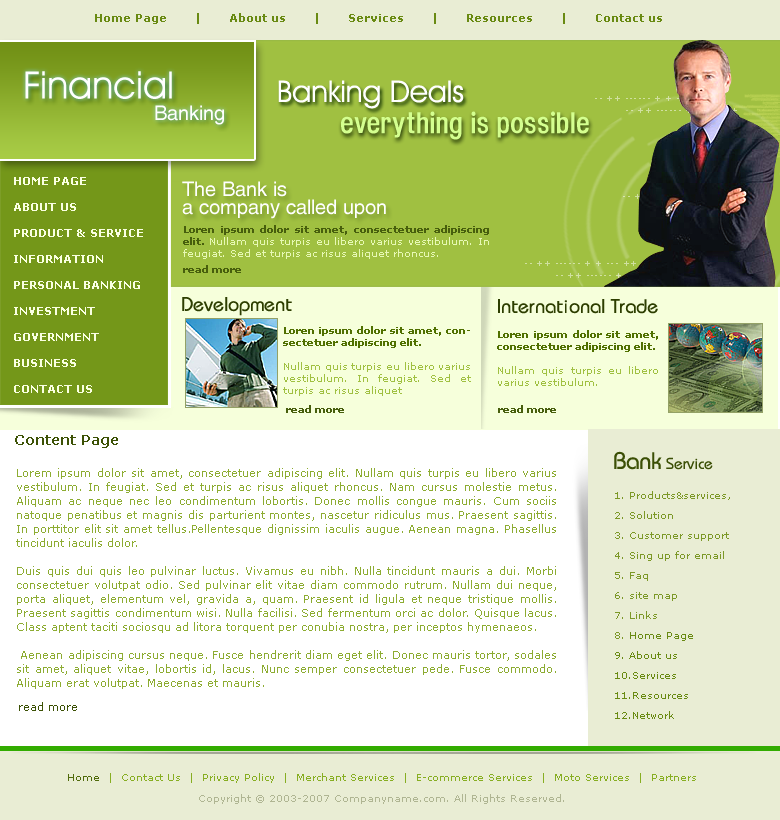
<style>
.page{position:relative;width:780px;height:820px;background:#ffffff}
.page>*{position:absolute;margin:0}
.t1{font:11px "Verdana-Bold";color:#698a12}
.t2{font:38px "AvantGardeITCbyBT-Book";color:#ffffff}
.t3{font:30px "AvantGardeITCbyBT-Book";color:#ffffff}
.t4{font:20px "Helios";color:#ffffff}
.t5{font:29px "HeadacheNormal";color:#d4ff8f}
.t6{font:11px/13px "Verdana-Bold";color:#faffe2}
.t7{font:20px/18px "Helios";color:#ffffff}
.t8{font:20px "Bauhaus";color:#2d3e00}
.t9{font:10px "Verdana";color:#a0c041}
.t10{font:10px "Verdana-Bold";color:#507000}
.t11{font:10px "Verdana-Bold";color:#475e0d}
.t12{font:14px "Verdana-Bold";color:#3c5105}
.t13{font:16px "Bauhaus";color:#3b4f05}
.t14{font:24px "Bauhaus";color:#3b4f05}
.t15{font:11px/14px "Verdana";color:#8dac32}
.t16{font:10px/20px "Verdana";color:#7c9827}
.t17{font:10px/20px "Verdana";color:#698a12}
.t18{font:11px "Verdana";color:#3c5105}
.t19{font:10px/21px "Verdana";color:#87ae22}
.t20{font:10px/21px "Verdana";color:#516b0c}
.t21{font:10px/21px "Verdana";color:#afb592}
</style>
<div class="page">
<p class="t1" style="left:95px;top:13px;width:567px;height:11px">Home Page       |       About us       |       Services       |       Resources       |       Contact us</p>
<p class="t2" style="left:25px;top:71px;width:147px;height:28px">Financial</p>
<p class="t3" style="left:278px;top:80px;width:186px;height:29px">Banking Deals</p>
<p class="t4" style="left:155px;top:105px;width:69px;height:20px">Banking</p>
<p class="t5" style="left:341px;top:111px;width:248px;height:29px">everything is possible</p>
<p class="t6" style="left:14px;top:177px;width:129px;height:216px;text-align:justify">HOME PAGE<br><br>ABOUT US<br><br>PRODUCT &amp; SERVICE<br><br>INFORMATION<br><br>PERSONAL BANKING<br><br>INVESTMENT<br><br>GOVERNMENT<br><br>BUSINESS<br><br>CONTACT US</p>
<p class="t7" style="left:182px;top:181px;width:204px;height:38px">The Bank is<br>a company called upon</p>
<p class="t8" style="left:182px;top:297px;width:110px;height:19px">Development</p>
<p class="t8" style="left:498px;top:299px;width:160px;height:15px">International Trade</p>
<p class="t9" style="left:283px;top:326px;width:188px;height:70px;text-align:justify"><span class="t10">Loren ipsum dolor sit amet, consectetuer adipiscing elit.<br><br></span>Nullam quis turpis eu libero varius vestibulum. In feugiat. Sed et turpis ac risus aliquet</p>
<p class="t10" style="left:497px;top:330px;width:161px;height:56px;text-align:justify">Loren ipsum dolor sit amet, consectetuer adipiscing elit.<br><br><span class="t9">Nullam quis turpis eu libero varius vestibulum.</span></p>
<p class="t11" style="left:286px;top:405px;width:58px;height:8px">read more</p>
<p class="t11" style="left:498px;top:405px;width:58px;height:8px">read more</p>
<p class="t12" style="left:15px;top:435px;width:103px;height:13px">Content Page</p>
<p class="t13" style="left:614px;top:451px;width:99px;height:19px"><span class="t14">Bank</span> Service</p>
<p class="t15" style="left:16px;top:468px;width:540px;height:221px;text-align:justify">Lorem ipsum dolor sit amet, consectetuer adipiscing elit. Nullam quis turpis eu libero varius vestibulum. In feugiat. Sed et turpis ac risus aliquet rhoncus. Nam cursus molestie metus. Aliquam ac neque nec leo condimentum lobortis. Donec mollis congue mauris. Cum sociis natoque penatibus et magnis dis parturient montes, nascetur ridiculus mus. Praesent sagittis. In porttitor elit sit amet tellus.Pellentesque dignissim iaculis augue. Aenean magna. Phasellus tincidunt iaculis dolor. <br><br>Duis quis dui quis leo pulvinar luctus. Vivamus eu nibh. Nulla tincidunt mauris a dui. Morbi consectetuer volutpat odio. Sed pulvinar elit vitae diam commodo rutrum. Nullam dui neque, porta aliquet, elementum vel, gravida a, quam. Praesent id ligula et neque tristique mollis. Praesent sagittis condimentum wisi. Nulla facilisi. Sed fermentum orci ac dolor. Quisque lacus. Class aptent taciti sociosqu ad litora torquent per conubia nostra, per inceptos hymenaeos.<br><br> Aenean adipiscing cursus neque. Fusce hendrerit diam eget elit. Donec mauris tortor, sodales sit amet, aliquet vitae, lobortis id, lacus. Nunc semper consectetuer pede. Fusce commodo. Aliquam erat volutpat. Maecenas et mauris.</p>
<p class="t16" style="left:615px;top:491px;width:115px;height:228px">1. Products&amp;services,<br>2. Solution<br>3. Customer support<br>4. Sing up for email<br>5. Faq<br>6. site map<br>7. Links<br>8. <span class="t17">Home Page <br>9. About us<br>10.Services<br>11.Resources<br>12.Network</span></p>
<p class="t18" style="left:19px;top:702px;width:58px;height:9px">read more</p>
<p class="t19" style="left:68px;top:773px;width:628px;height:31px;text-align:center"><span class="t20">Home  </span>|  Contact Us  |  Privacy Policy  |  Merchant Services  |  E-commerce Services  |  Moto Services  |  Partners<br><span class="t21">Copyright © 2003-2007 Companyname.com. All Rights Reserved.</span></p>
</div>
